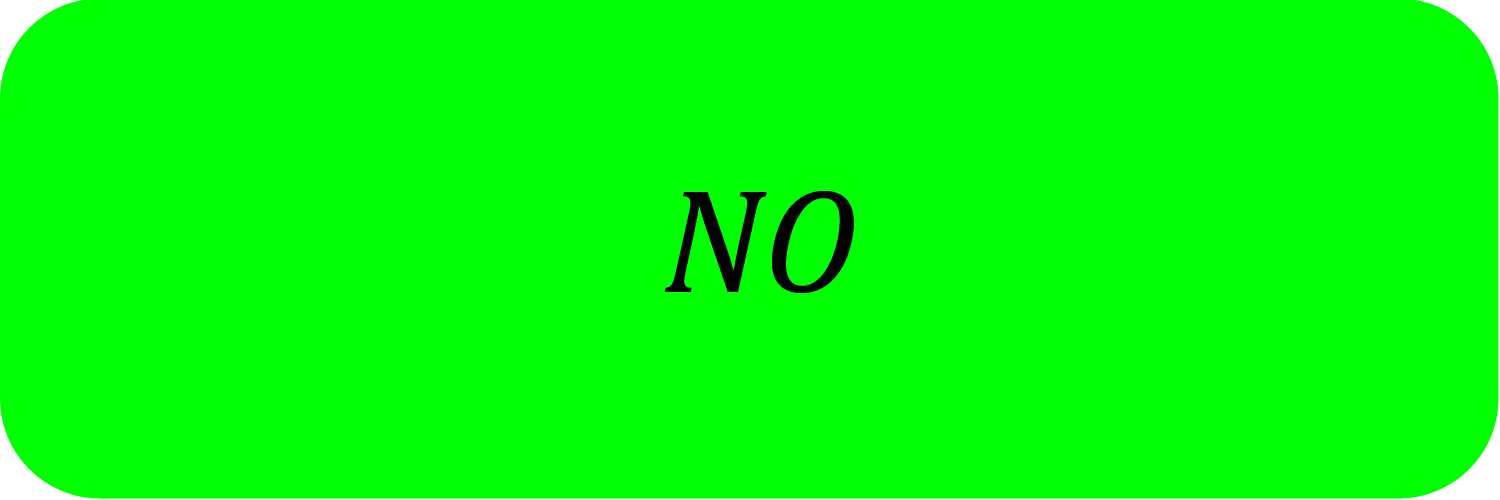
<style>
.page{position:relative;width:1500px;height:500px;background:#00ff00}
.page>*{position:absolute;margin:0}
.t1{font:150px "Cambria-Italic";color:#000000}
</style>
<div class="page">
<p class="t1" style="left:664px;top:191px;width:190px;height:102px">NO</p>
</div>
